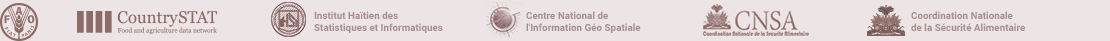
<style>
.page{position:relative;width:1110px;height:41px;background:#ede4e6}
.page>*{position:absolute;margin:0}
.t1{font:10px "Roboto-Bold";color:#a68f8f}
</style>
<div class="page">
<p class="t1" style="left:314px;top:11px;width:129px;height:22px">Institut Haïtien des <br>Statistiques et Informatiques</p>
<p class="t1" style="left:526px;top:11px;width:115px;height:22px">Centre National de <br>l'Information Géo Spatiale</p>
<p class="t1" style="left:911px;top:11px;width:114px;height:20px">Coordination Nationale <br>de la Sécurité Alimentaire</p>
</div>
